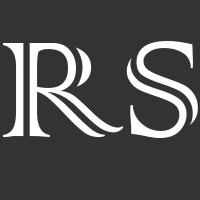
<style>
.page{position:relative;width:200px;height:200px;background:#333333}
.page>*{position:absolute;margin:0}
.t1{font:179.7px "ColonnaMT";color:#ffffff}
</style>
<div class="page">
<p class="t1" style="left:3px;top:41px;width:195px;height:97px">RS</p>
</div>
